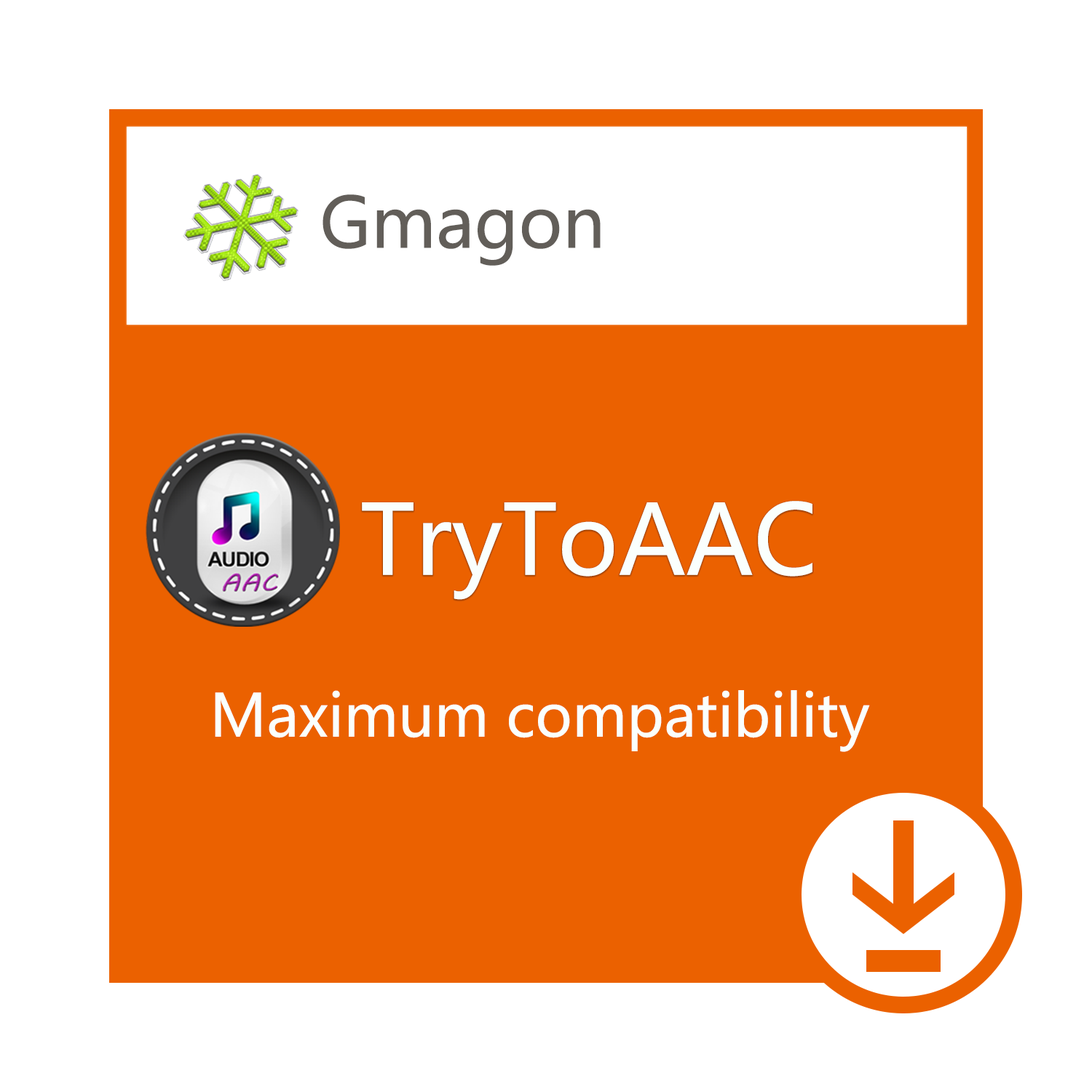
<style>
.page{position:relative;width:1092px;height:1092px;background:#ffffff}
.page>*{position:absolute;margin:0}
.t1{font:69.3px "MicrosoftYaHei";color:#625e59}
.t2{font:95.9px "MicrosoftYaHei";color:#fafffd}
.t3{font:58.2px "MicrosoftYaHei";color:#fafffd}
</style>
<div class="page">
<p class="t1" style="left:322px;top:194px;width:279px;height:72px">Gmagon</p>
<p class="t2" style="left:362px;top:501px;width:450px;height:99px">TryToAAC</p>
<p class="t3" style="left:215px;top:690px;width:655px;height:62px">Maximum compatibility</p>
</div>
